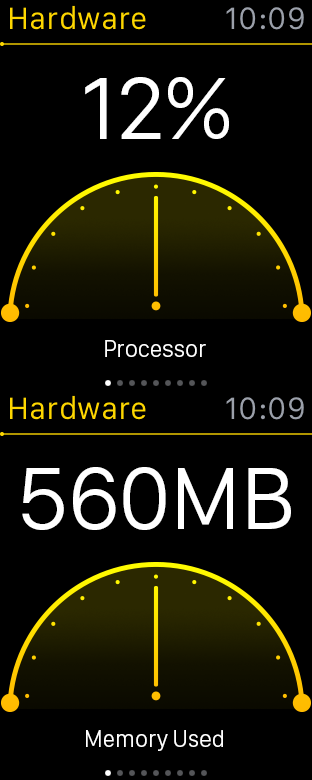
<style>
.page{position:relative;width:312px;height:780px;background:#000000}
.page>*{position:absolute;margin:0}
.t1{font:32px "SanFranciscoText-Regular";color:#fdd600}
.t2{font:32px "SanFranciscoText-Regular";color:#9ba0aa}
.t3{font:92px "SanFranciscoDisplay-Regular";color:#ffffff}
.t4{font:24px "SanFranciscoDisplay-Light";color:#ffffff}
</style>
<div class="page">
<p class="t1" style="left:10px;top:5px;width:136px;height:25px">Hardware</p>
<p class="t2" style="left:226px;top:7px;width:78px;height:23px">10:09</p>
<p class="t3" style="left:85px;top:77px;width:144px;height:62px">12%</p>
<p class="t4" style="left:105px;top:340px;width:101px;height:17px">Processor</p>
<p class="t1" style="left:10px;top:395px;width:136px;height:25px">Hardware</p>
<p class="t2" style="left:226px;top:397px;width:78px;height:23px">10:09</p>
<p class="t3" style="left:22px;top:467px;width:269px;height:63px">560MB</p>
<p class="t4" style="left:86px;top:730px;width:137px;height:21px">Memory Used</p>
</div>
